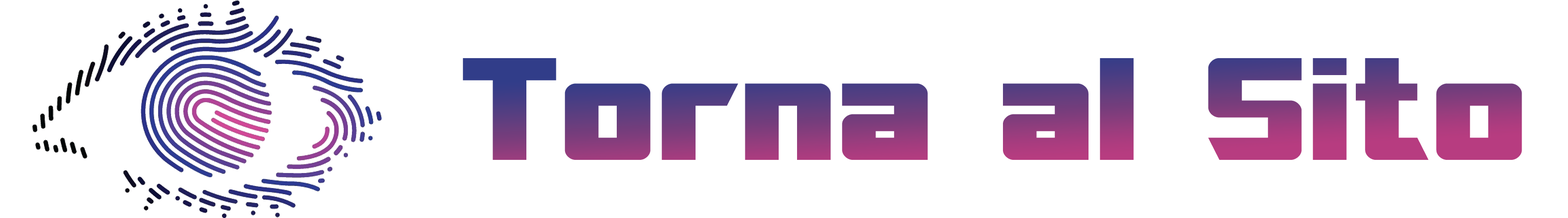
<style>
.page{position:relative;width:1568px;height:218px;background:#ffffff}
.page>*{position:absolute;margin:0}
.t1{font:145px "SFTransRoboticsExtended"}
</style>
<div class="page">
<p class="t1" style="left:463px;top:58px;width:1059px;height:102px">Torna al Sito</p>
</div>
